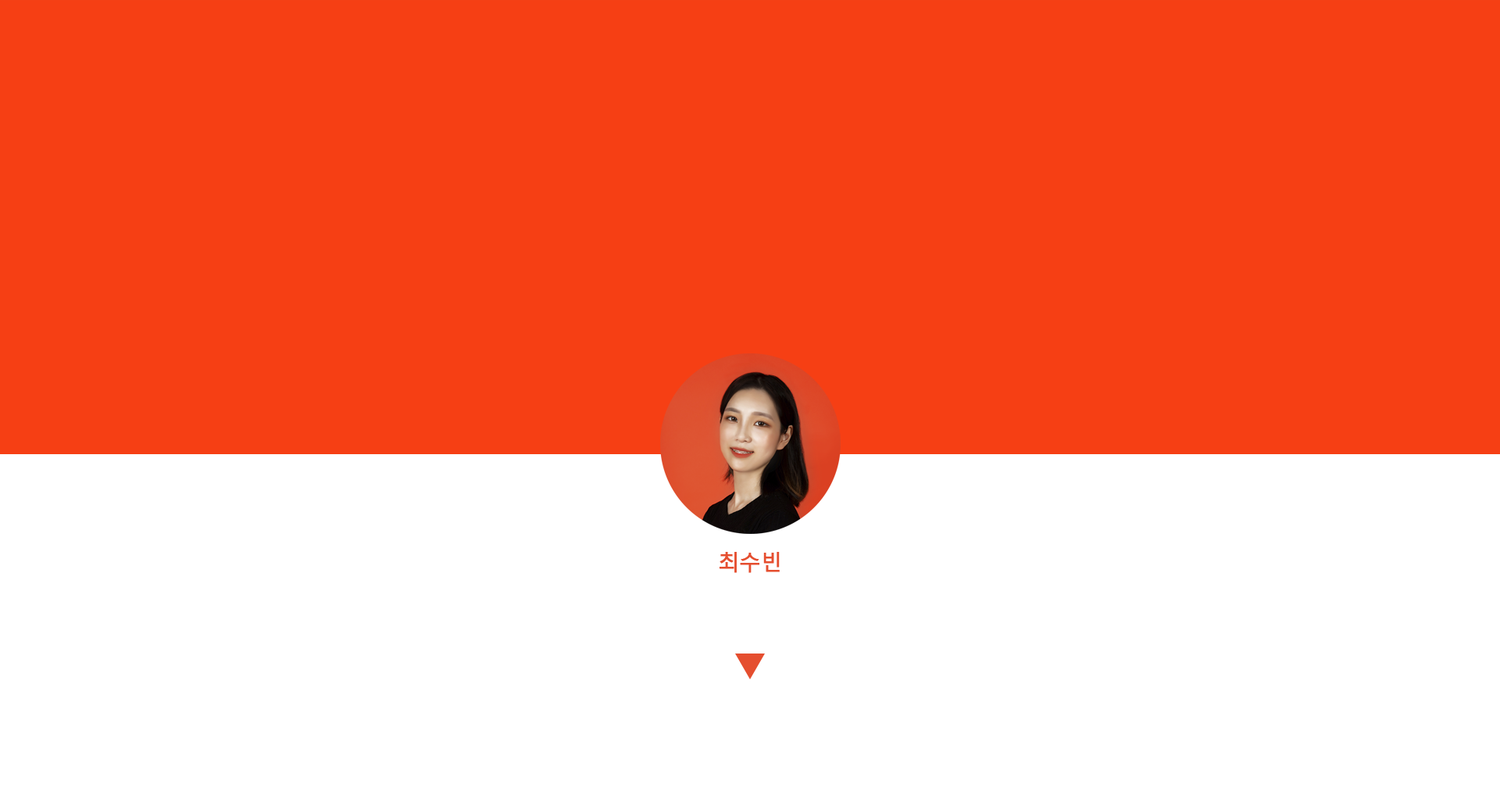
<style>
.page{position:relative;width:1500px;height:795px;background:#f63f14}
.page>*{position:absolute;margin:0}
.t1{font:20.8px "MalgunGothic";color:#e54e2f;font-weight:bold}
</style>
<div class="page">
<p class="t1" style="left:719px;top:552px;width:61px;height:21px">최수빈</p>
</div>
